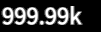
<style>
.page{position:relative;width:101px;height:32px;background:#000000}
.page>*{position:absolute;margin:0}
.t1{font:22px "WebPSD-18463539-0-Regular";color:#ffffff;font-weight:bold}
</style>
<div class="page">
<p class="t1" style="left:0px;top:0px;width:101px;height:32px">999.99k</p>
</div>
